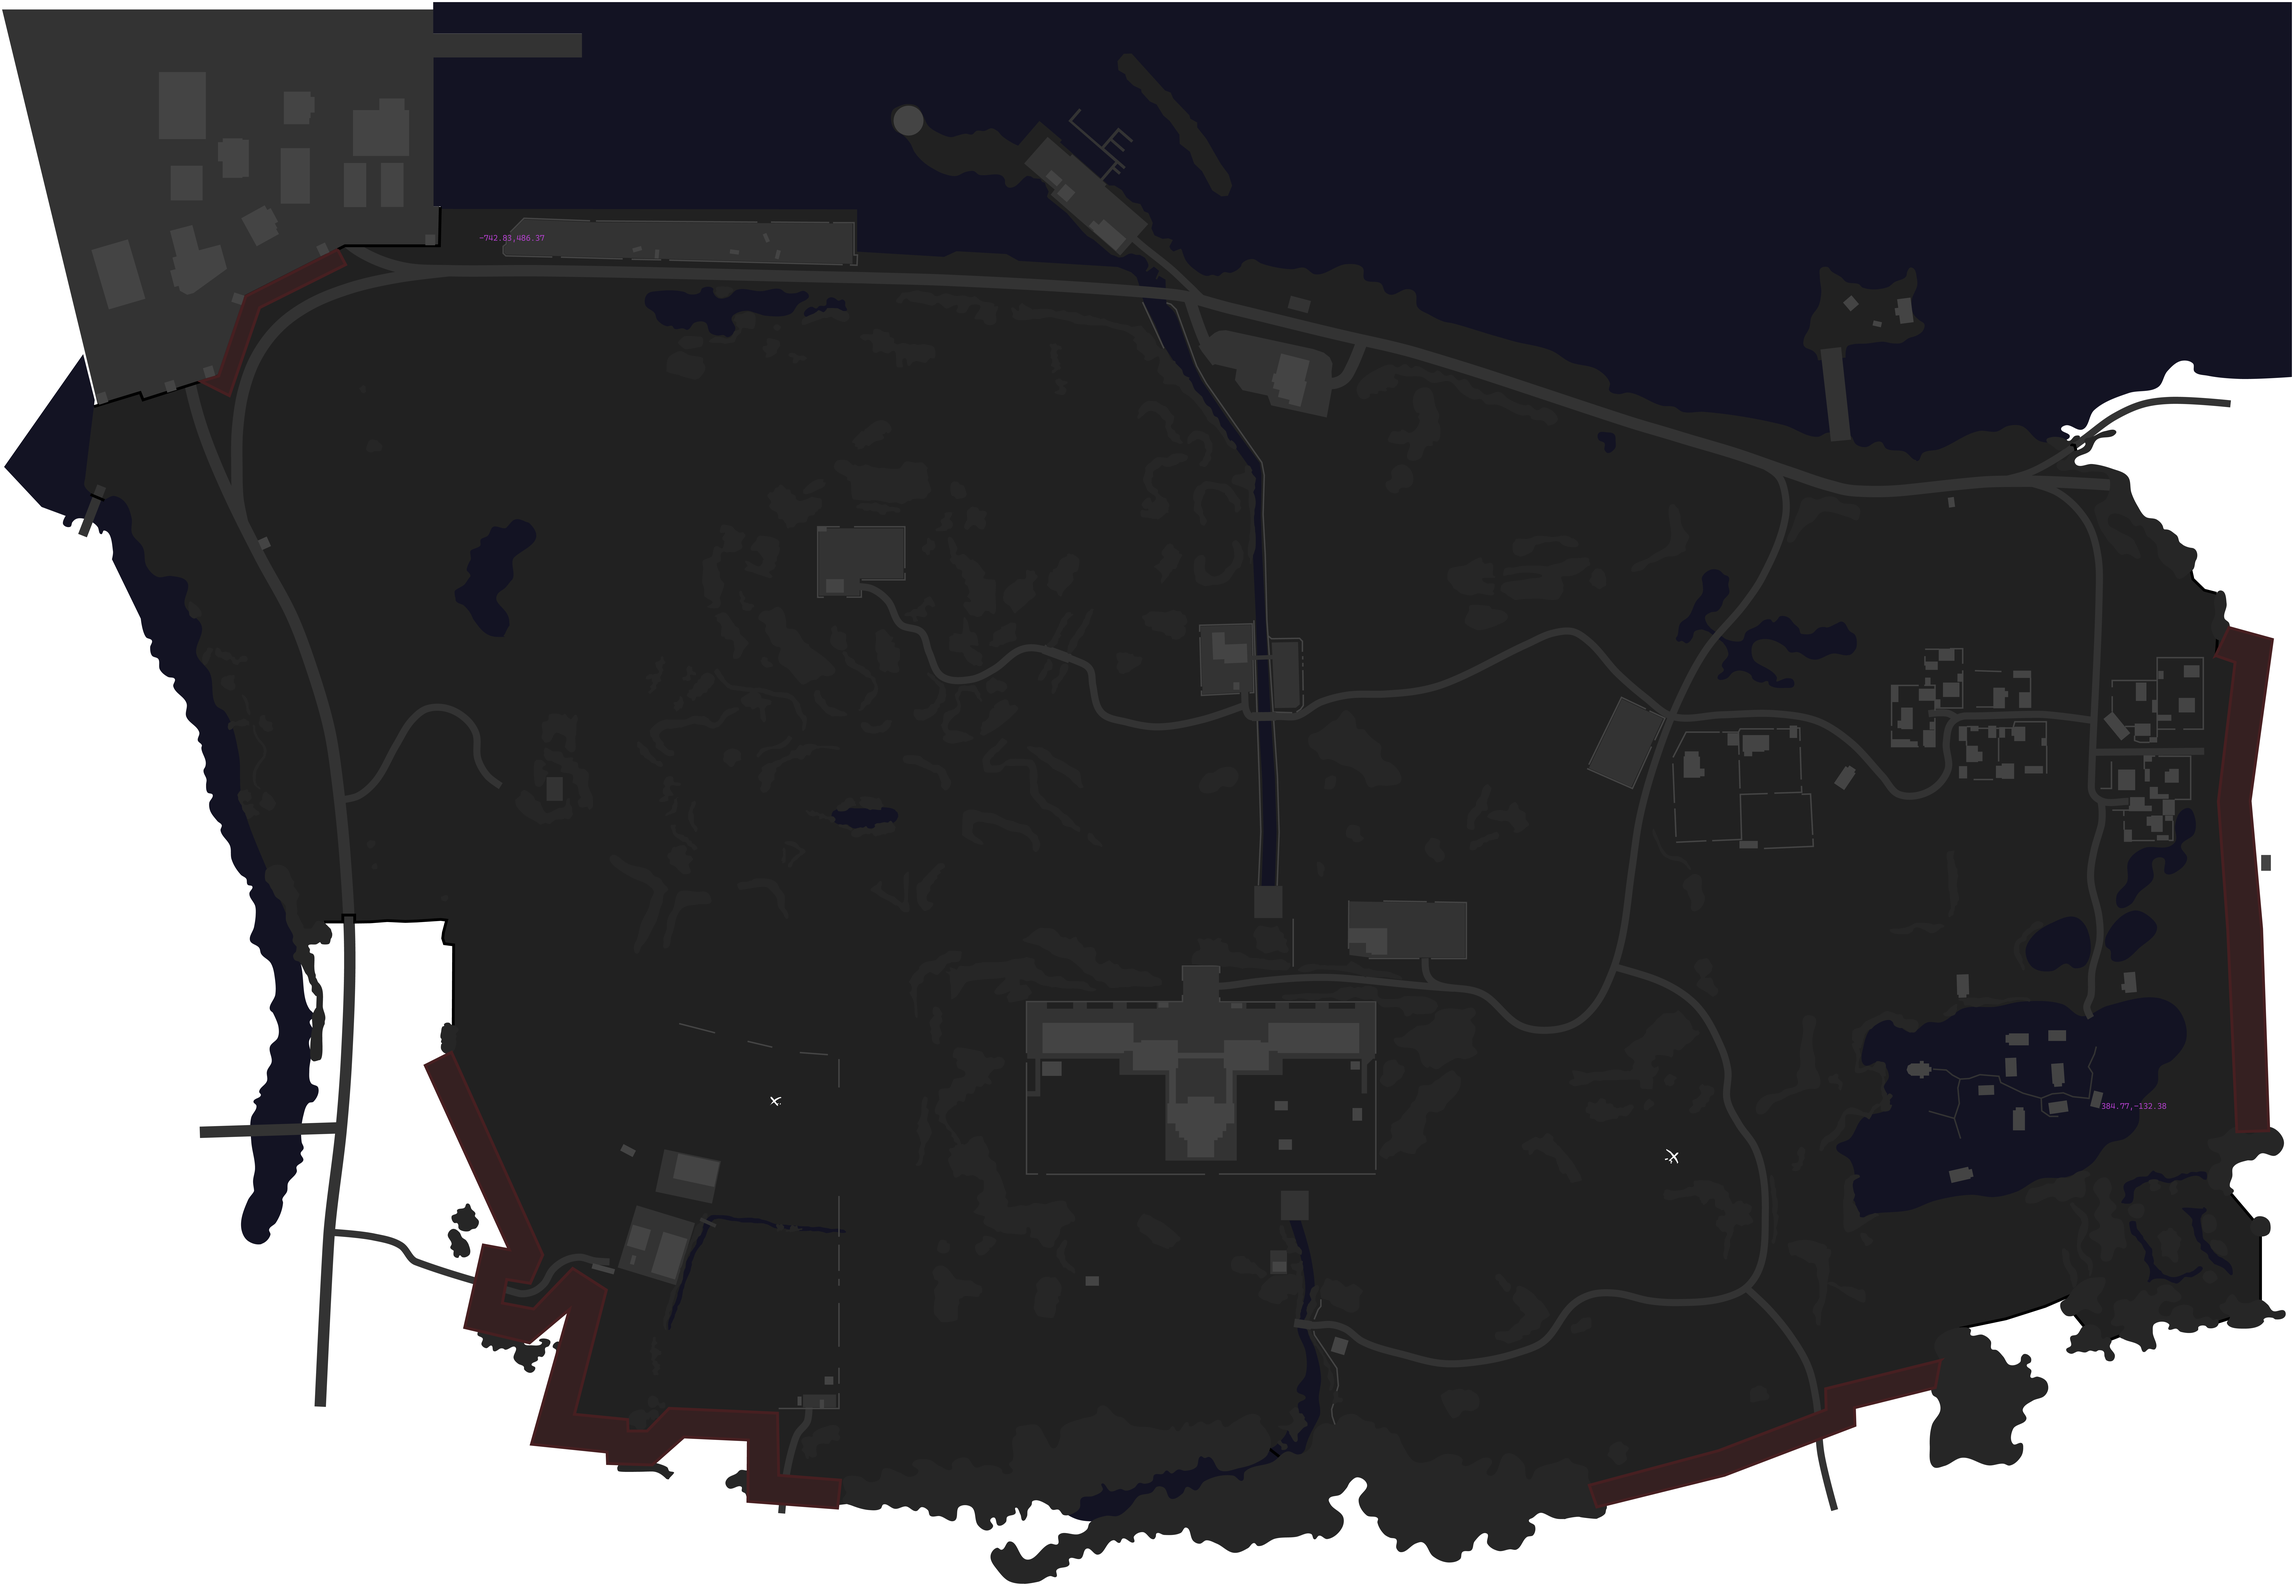
<style>
.page{position:relative;width:2294px;height:1586px;background:#212121}
.page>*{position:absolute;margin:0}
.t1{font:8px "CascadiaMonoRoman-SemiLight";color:#bb42d6}
</style>
<div class="page">
<p class="t1" style="left:480px;top:235px;width:64px;height:7px">-742.83,486.37</p>
<p class="t1" style="left:2101px;top:1103px;width:65px;height:8px">384.77,-132.38</p>
</div>
